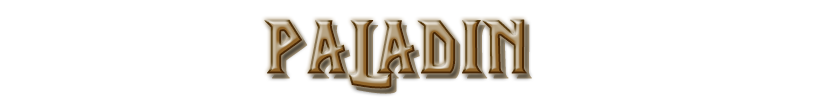
<style>
.page{position:relative;width:828px;height:100px;background:#ffffff}
.page>*{position:absolute;margin:0}
.t1{font:75px "LifeCraft";letter-spacing:0.025em;font-weight:bold}
</style>
<div class="page">
<p class="t1" style="left:264px;top:19px;width:263px;height:70px">PALADIN</p>
<p class="t1" style="left:269px;top:24px;width:263px;height:70px">PALADIN</p>
</div>
